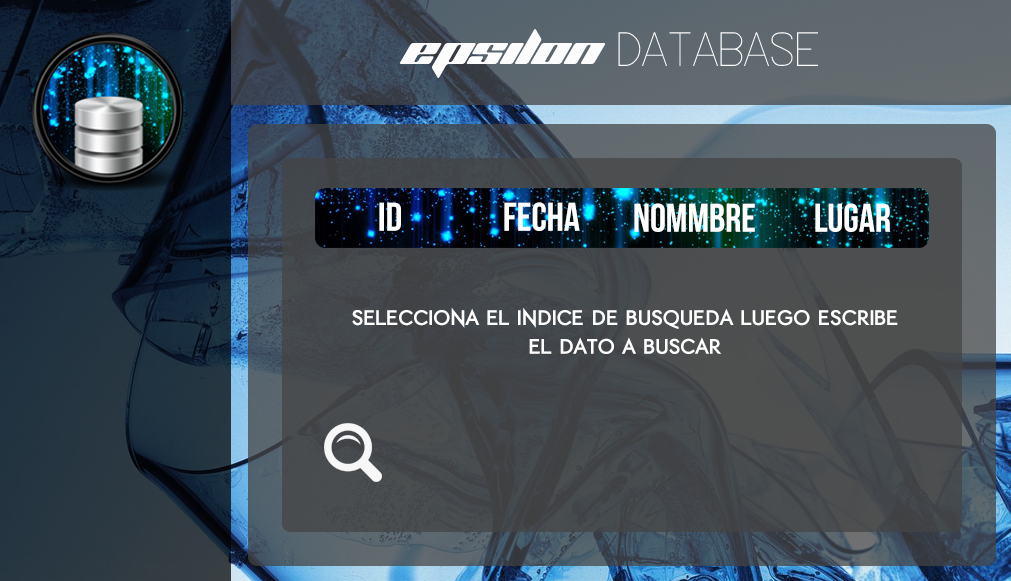
<style>
.page{position:relative;width:1011px;height:581px}
.page>*{position:absolute;margin:0}
.t1{font:24px "ETH-Black";color:#fefefe}
</style>
<div class="page">
<p class="t1" style="left:352px;top:307px;width:546px;height:47px;text-align:center">Selecciona el indice de busqueda luego escribe<br>el dato a buscar</p>
</div>
